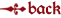
<style>
.page{position:relative;width:61px;height:18px;background:#ffffff}
.page>*{position:absolute;margin:0}
.t1{font:16px "Kelmscott-Regular";color:#8e0a12}
</style>
<div class="page">
<p class="t1" style="left:28px;top:1px;width:33px;height:14px">back</p>
</div>
